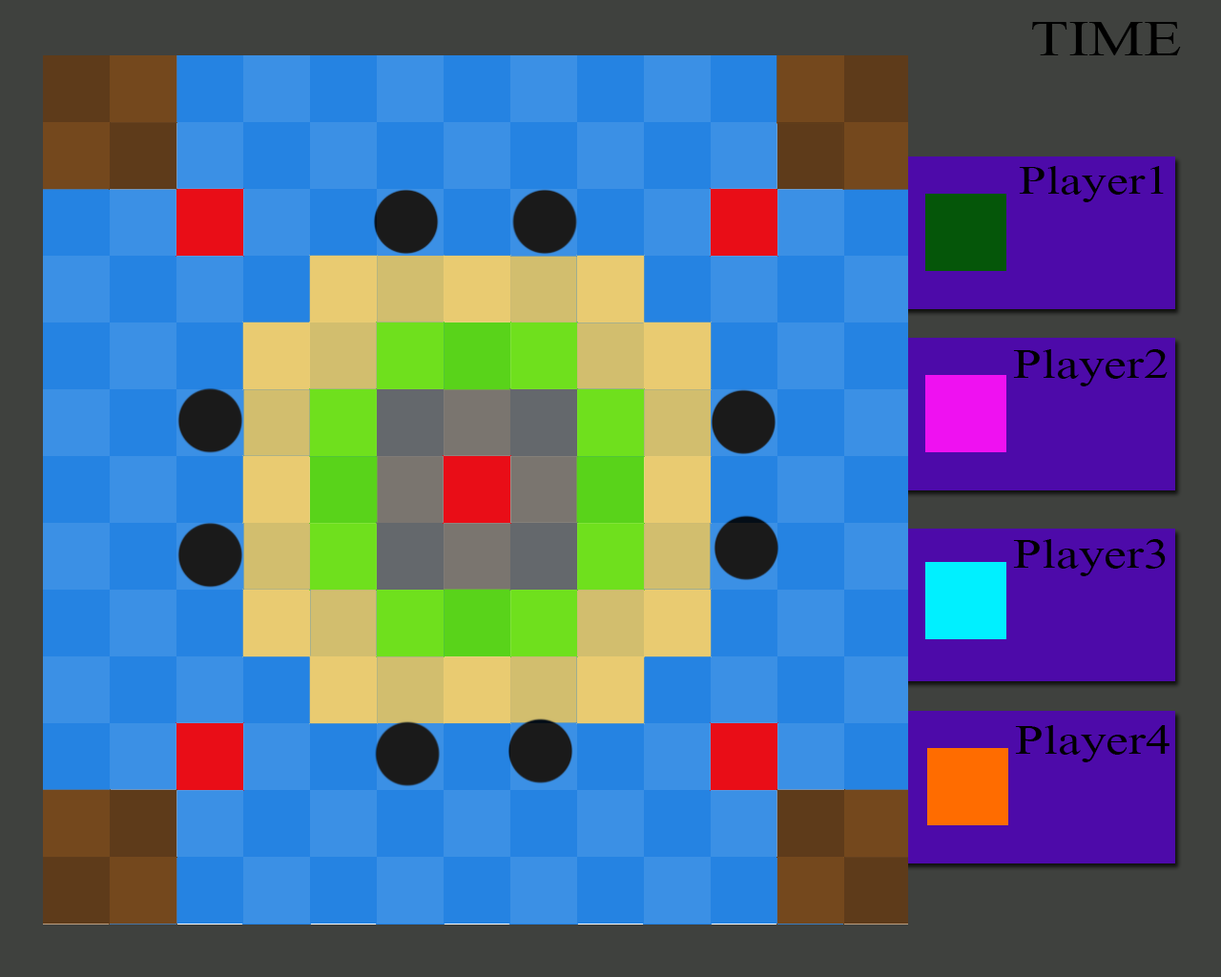
<style>
.page{position:relative;width:1221px;height:977px}
.page>*{position:absolute;margin:0}
.t1{font:76.9px "AngsanaNew";color:#000000;scale:1.22 1}
.t2{font:60.9px "AngsanaNew";color:#000000;scale:1.23 1}
.t3{font:63.4px "AngsanaNew";color:#000000;scale:1.22 1}
</style>
<div class="page">
<p class="t1" style="left:1032px;top:22px;width:149px;height:33px">TIME</p>
<p class="t2" style="left:1019px;top:166px;width:145px;height:36px">Player1</p>
<p class="t3" style="left:1013px;top:349px;width:154px;height:37px">Player2</p>
<p class="t3" style="left:1013px;top:539px;width:153px;height:37px">Player3</p>
<p class="t3" style="left:1015px;top:725px;width:154px;height:37px">Player4</p>
</div>
